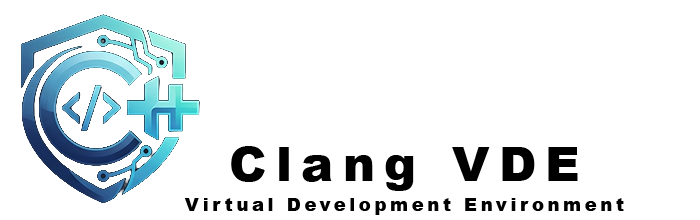
<style>
.page{position:relative;width:700px;height:220px;background:#ffffff}
.page>*{position:absolute;margin:0}
.t1{font:18px/30px "Arial-Black";letter-spacing:0.2em;color:#000000}
.t2{font:48px/30px "Arial-Black";letter-spacing:0.2em;color:#000000}
</style>
<div class="page">
<p class="t1" style="left:184px;top:146px;width:440px;height:69px;text-align:center"><span class="t2">Clang VDE<br></span>Virtual Development Environment</p>
</div>
